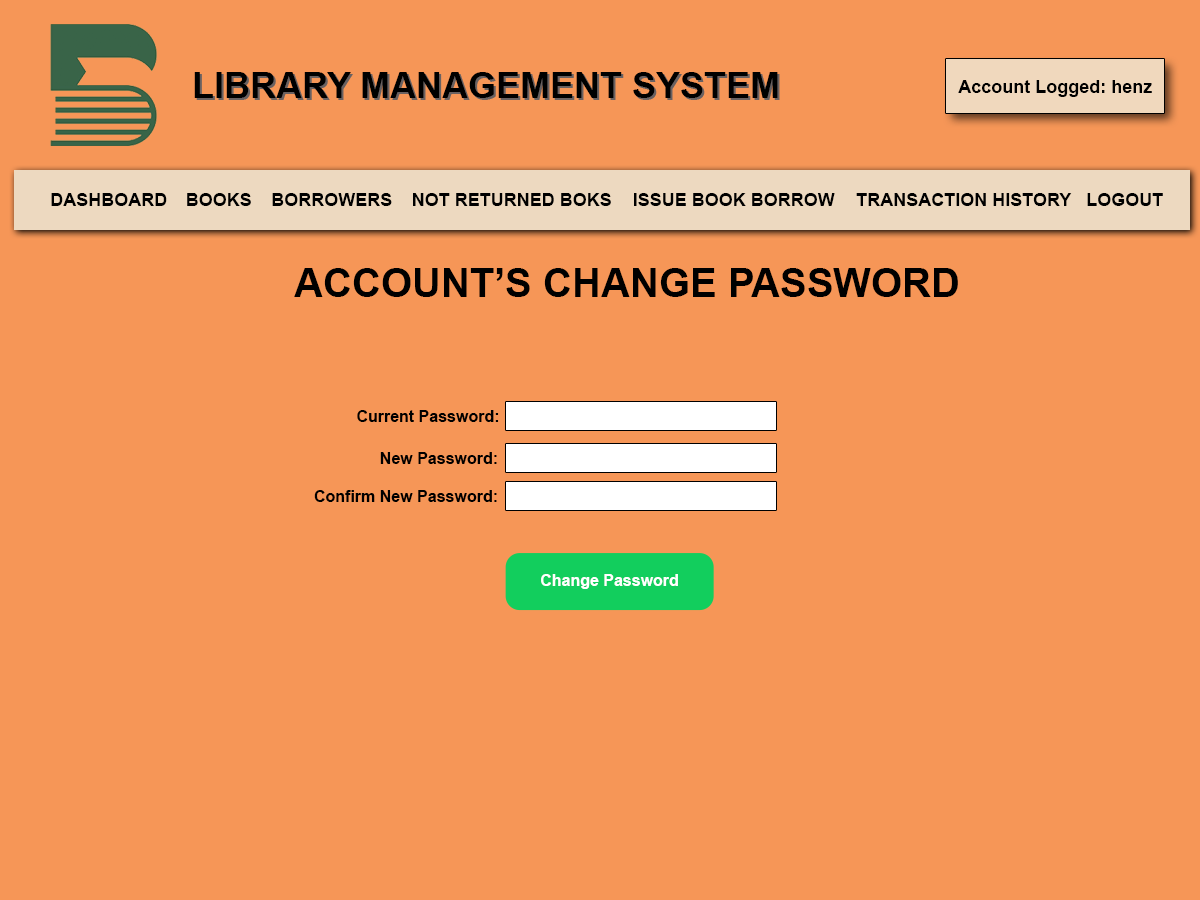
<style>
.page{position:relative;width:1200px;height:900px;background:#f69657}
.page>*{position:absolute;margin:0}
.t1{font:36px "Arial-BoldMT";color:#000000}
.t2{font:18px "Arial-BoldMT";color:#000000}
.t3{font:40px "Arial-BoldMT";color:#000000}
.t4{font:16px "Arial-BoldMT";color:#000000}
.t5{font:16px "Arial-BoldMT";color:#ffffff}
</style>
<div class="page">
<p class="t1" style="left:194px;top:72px;width:584px;height:26px">LIBRARY MANAGEMENT SYSTEM</p>
<p class="t2" style="left:958px;top:80px;width:194px;height:17px">Account Logged: henz</p>
<p class="t2" style="left:51px;top:193px;width:116px;height:13px">DASHBOARD</p>
<p class="t2" style="left:187px;top:193px;width:64px;height:13px">BOOKS</p>
<p class="t2" style="left:272px;top:193px;width:120px;height:13px">BORROWERS</p>
<p class="t2" style="left:413px;top:193px;width:198px;height:13px">NOT RETURNED BOKS</p>
<p class="t2" style="left:634px;top:193px;width:201px;height:13px">ISSUE BOOK BORROW</p>
<p class="t2" style="left:856px;top:193px;width:216px;height:13px">TRANSACTION HISTORY</p>
<p class="t2" style="left:1087px;top:193px;width:76px;height:13px">LOGOUT</p>
<p class="t3" style="left:294px;top:268px;width:664px;height:29px">ACCOUNT’S CHANGE PASSWORD</p>
<p class="t4" style="left:357px;top:410px;width:142px;height:12px">Current Password:</p>
<p class="t4" style="left:380px;top:452px;width:117px;height:12px">New Password:</p>
<p class="t4" style="left:314px;top:490px;width:183px;height:12px">Confirm New Password:</p>
<p class="t5" style="left:541px;top:574px;width:137px;height:15px">Change Password</p>
</div>
